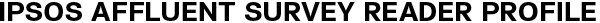
<style>
.page{position:relative;width:600px;height:23px;background:#ffffff}
.page>*{position:absolute;margin:0}
.t1{font:28px "PFEncoreSansPro-Bold";letter-spacing:-0.005em;color:#000000}
</style>
<div class="page">
<p class="t1" style="left:0px;top:2px;width:596px;height:19px">IPSOS AFFLUENT SURVEY READER PROFILE</p>
</div>
